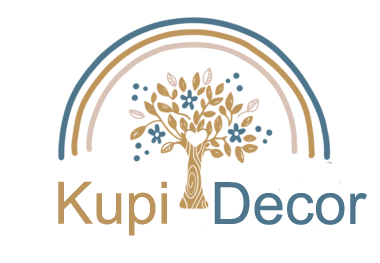
<style>
.page{position:relative;width:380px;height:263px;background:#ffffff}
.page>*{position:absolute;margin:0}
.t1{font:58.3px "ArialMT";color:#bc955e}
.t2{font:58.3px "ArialMT";color:#4d758c}
</style>
<div class="page">
<p class="t1" style="left:58px;top:181px;width:109px;height:55px">Kupi</p>
<p class="t2" style="left:214px;top:182px;width:153px;height:43px">Decor</p>
</div>
